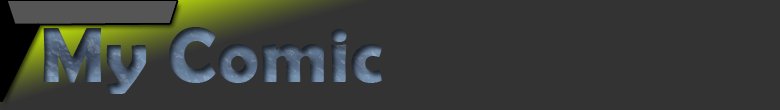
<style>
.page{position:relative;width:780px;height:110px;background:#333333}
.page>*{position:absolute;margin:0}
.t1{font:79.3px "BerlinSansFBDemi-Bold"}
</style>
<div class="page">
<p class="t1" style="left:43px;top:27px;width:339px;height:67px">My Comic</p>
</div>
